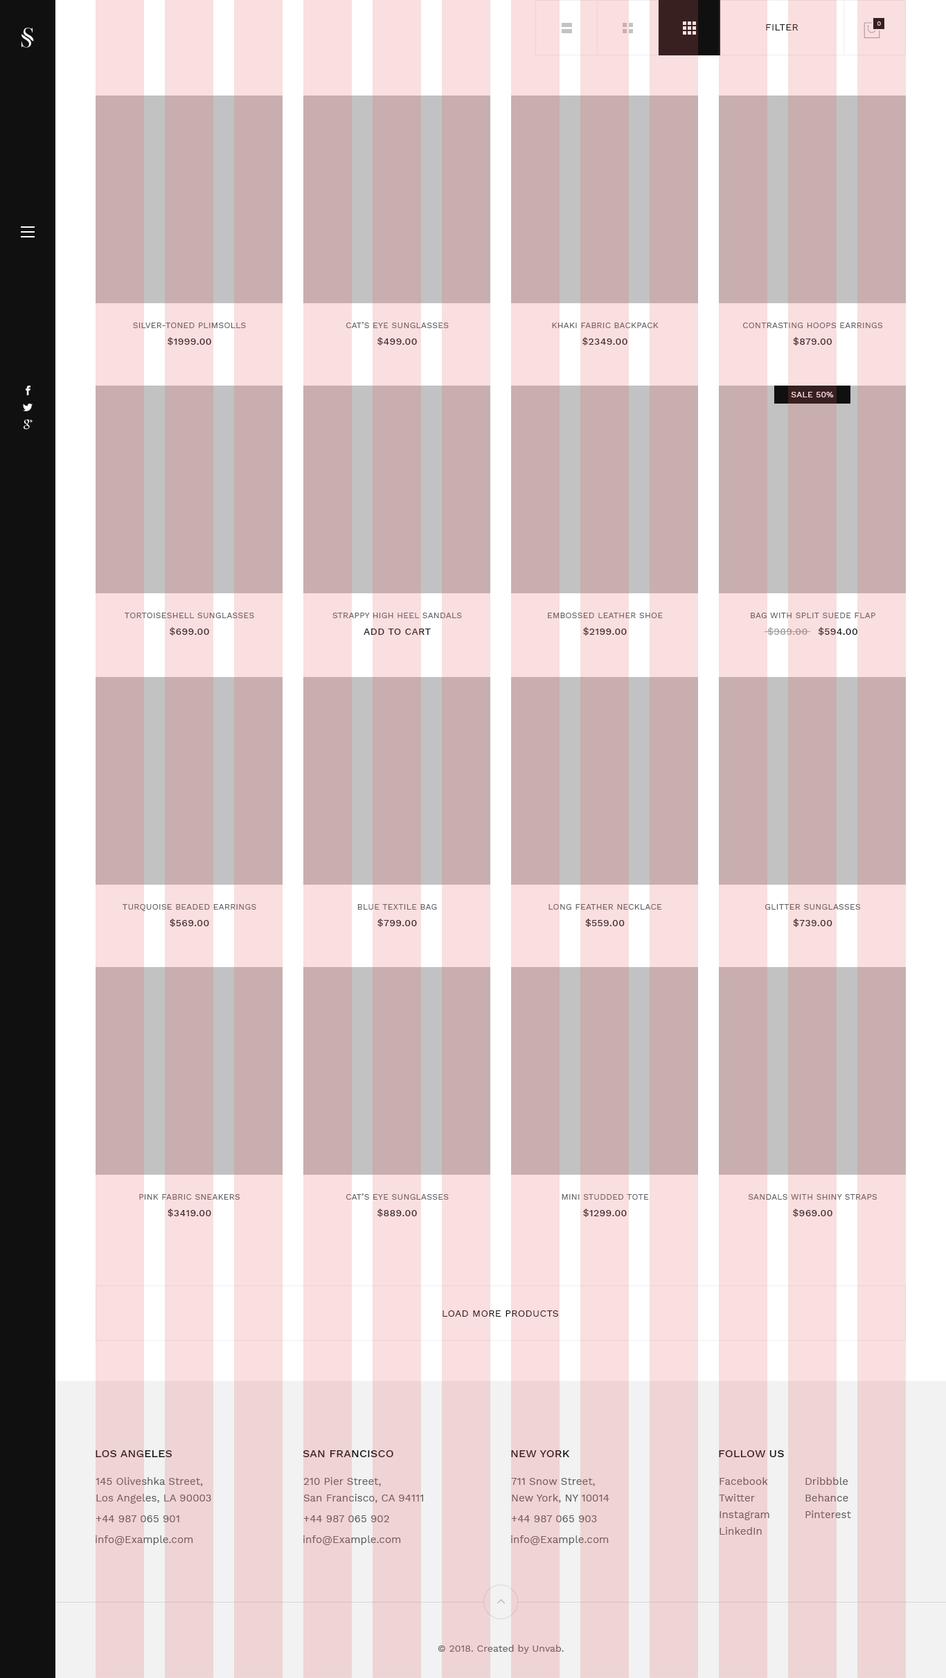
<style>
.page{position:relative;width:946px;height:1678px;background:#c8aeae}
.page>*{position:absolute;margin:0}
.t1{font:9.7px "WorkSans-Regular";letter-spacing:0.025em;text-transform:uppercase}
.t2{font:6.2px "WorkSans-Regular";letter-spacing:0.025em;color:#f9dfdf;text-transform:uppercase}
.t3{font:8.3px/20.8px "WorkSans-Regular";letter-spacing:0.025em}
.t4{font:9.7px/16.6px "WorkSans-Medium";letter-spacing:0.025em}
.t5{font:8.3px "WorkSans-Regular";letter-spacing:0.025em;color:#f9dfdf;text-transform:uppercase}
.t6{font:9.7px/16.6px "WorkSans-Medium";letter-spacing:0.025em;text-transform:uppercase}
.t7{font:9.7px "WorkSans-Regular";letter-spacing:0.025em;color:#381e1e;text-transform:uppercase}
.t8{font:11.1px "WorkSans-Medium";letter-spacing:0.01em;text-transform:uppercase}
.t9{font:11.1px "WorkSans-Medium";letter-spacing:0.01em;color:#381e1e;text-transform:uppercase}
.t10{font:10.4px/16.6px "WorkSans-Regular";letter-spacing:0.005em;color:#795f5f}
.t11{font:10.4px "WorkSans-Regular";letter-spacing:0.005em;color:#795f5f}
.t12{font:9.7px "WorkSans-Regular";letter-spacing:0.005em;color:#795f5f}
</style>
<div class="page">
<p class="t1" style="left:766px;top:24px;width:32px;height:6px">filter</p>
<p class="t2" style="left:877px;top:21px;width:4px;height:5px">0</p>
<p class="t3" style="left:133px;top:323px;width:113px;height:22px;text-align:center">SILVER-TONED PLIMSOLLS<br><span class="t4">$1999.00</span></p>
<p class="t3" style="left:345px;top:322px;width:104px;height:23px;text-align:center">CAT’S EYE SUNGLASSES<br><span class="t4">$499.00</span></p>
<p class="t3" style="left:552px;top:323px;width:106px;height:22px;text-align:center">KHAKI FABRIC BACKPACK<br><span class="t4">$2349.00</span></p>
<p class="t3" style="left:742px;top:323px;width:141px;height:22px;text-align:center">CONTRASTING HOOPS EARRINGS<br><span class="t4">$879.00</span></p>
<p class="t5" style="left:791px;top:392px;width:43px;height:5px">sale 50%</p>
<p class="t3" style="left:125px;top:613px;width:129px;height:23px;text-align:center">TORTOISESHELL SUNGLASSES<br><span class="t4">$699.00</span></p>
<p class="t3" style="left:332px;top:613px;width:130px;height:22px;text-align:center">STRAPPY HIGH HEEL SANDALS<br><span class="t6">add to cart</span></p>
<p class="t3" style="left:548px;top:613px;width:115px;height:23px;text-align:center">EMBOSSED LEATHER SHOE<br><span class="t4">$2199.00</span></p>
<p class="t3" style="left:750px;top:613px;width:125px;height:23px;text-align:center">BAG WITH SPLIT SUEDE FLAP<br><span class="t4">$989.00</span><span class="t4">   $594.00</span></p>
<p class="t3" style="left:123px;top:904px;width:133px;height:23px;text-align:center">TURQUOISE BEADED EARRINGS<br><span class="t4">$569.00</span></p>
<p class="t3" style="left:357px;top:904px;width:80px;height:23px;text-align:center">BLUE TEXTILE BAG<br><span class="t4">$799.00</span></p>
<p class="t3" style="left:548px;top:904px;width:114px;height:23px;text-align:center">LONG FEATHER NECKLACE<br><span class="t4">$559.00</span></p>
<p class="t3" style="left:764px;top:904px;width:97px;height:23px;text-align:center">GLITTER SUNGLASSES<br><span class="t4">$739.00</span></p>
<p class="t3" style="left:345px;top:1194px;width:104px;height:23px;text-align:center">CAT’S EYE SUNGLASSES<br><span class="t4">$889.00</span></p>
<p class="t3" style="left:139px;top:1194px;width:101px;height:23px;text-align:center">PINK FABRIC SNEAKERS<br><span class="t4">$3419.00</span></p>
<p class="t3" style="left:561px;top:1194px;width:88px;height:23px;text-align:center">MINI STUDDED TOTE<br><span class="t4">$1299.00</span></p>
<p class="t3" style="left:748px;top:1194px;width:129px;height:23px;text-align:center">SANDALS WITH SHINY STRAPS<br><span class="t4">$969.00</span></p>
<p class="t7" style="left:442px;top:1311px;width:116px;height:6px">load more products</p>
<p class="t8" style="left:96px;top:1450px;width:76px;height:7px">los angeles</p>
<p class="t9" style="left:303px;top:1450px;width:90px;height:7px">San Francisco</p>
<p class="t9" style="left:511px;top:1450px;width:59px;height:7px">New York</p>
<p class="t9" style="left:719px;top:1450px;width:65px;height:7px">follow us</p>
<p class="t10" style="left:96px;top:1477px;width:115px;height:27px">145 Oliveshka Street, <br>Los Angeles, LA 90003</p>
<p class="t10" style="left:303px;top:1477px;width:120px;height:26px">210 Pier Street,<br>San Francisco, CA 94111</p>
<p class="t10" style="left:511px;top:1478px;width:98px;height:25px">711 Snow Street, <br>New York, NY 10014</p>
<p class="t10" style="left:719px;top:1477px;width:50px;height:58px">Facebook<br>Twitter<br>Instagram<br>LinkedIn</p>
<p class="t10" style="left:805px;top:1477px;width:46px;height:41px">Dribbble<br>Behance<br>Pinterest</p>
<p class="t11" style="left:96px;top:1515px;width:83px;height:7px">+44 987 065 901</p>
<p class="t11" style="left:303px;top:1515px;width:86px;height:7px">+44 987 065 902</p>
<p class="t11" style="left:511px;top:1515px;width:86px;height:7px">+44 987 065 903</p>
<p class="t11" style="left:96px;top:1536px;width:97px;height:9px">info@Example.com</p>
<p class="t11" style="left:303px;top:1536px;width:98px;height:9px">info@Example.com</p>
<p class="t11" style="left:511px;top:1536px;width:98px;height:9px">info@Example.com</p>
<p class="t12" style="left:438px;top:1645px;width:126px;height:9px">© 2018. Created by Unvab.</p>
</div>
